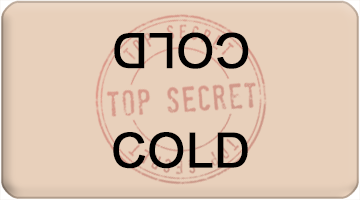
<style>
.page{position:relative;width:360px;height:200px;background:#e8d0bb}
.page>*{position:absolute;margin:0}
.t1{font:48px "ArialMT";color:#000000;font-weight:bold}
</style>
<div class="page">
<p class="t1" style="left:114px;top:32px;width:135px;height:37px;rotate:180deg">COLD</p>
<p class="t1" style="left:113px;top:132px;width:135px;height:37px">COLD</p>
</div>
